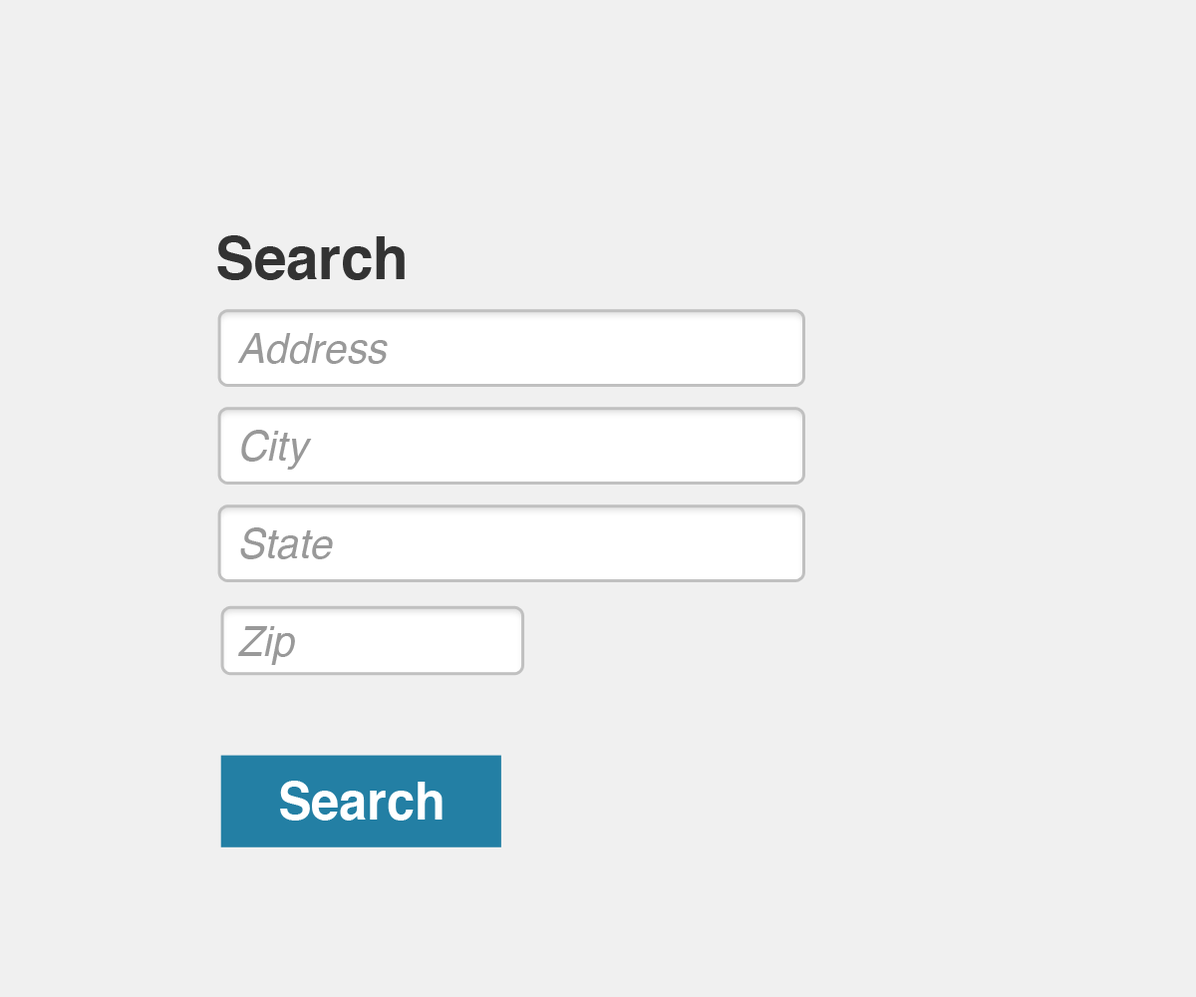
<style>
.page{position:relative;width:1196px;height:997px;background:#f0f0f0}
.page>*{position:absolute;margin:0}
.t1{font:59.8px "Helvetica-Bold";color:#333333;scale:0.97 1}
.t2{font:41.9px "Helvetica-Oblique";color:#999999;scale:0.97 1}
.t3{font:51.8px "Helvetica-Bold";color:#ffffff;scale:0.97 1}
</style>
<div class="page">
<p class="t1" style="left:217px;top:235px;width:188px;height:45px">Search</p>
<p class="t2" style="left:237px;top:333px;width:151px;height:31px">Address</p>
<p class="t2" style="left:241px;top:430px;width:71px;height:40px">City</p>
<p class="t2" style="left:240px;top:527px;width:93px;height:32px">State</p>
<p class="t2" style="left:238px;top:626px;width:57px;height:39px">Zip</p>
<p class="t3" style="left:280px;top:781px;width:163px;height:39px">Search</p>
</div>
